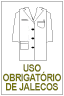
<style>
.page{position:relative;width:64px;height:96px;background:#ffffff}
.page>*{position:absolute;margin:0}
.t1{font:10.1px/9.3px "Arial-BoldMT";letter-spacing:-0.06em;color:#737310;scale:0.9 1}
</style>
<div class="page">
<p class="t1" style="left:3px;top:64px;width:58px;height:27px;text-align:center">USO<br>OBRIGATÓRIO<br>DE JALECOS</p>
</div>
